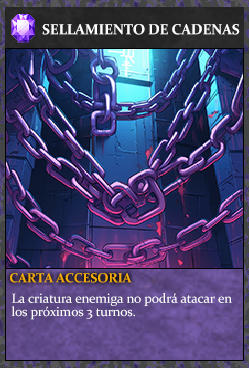
<style>
.page{position:relative;width:249px;height:368px}
.page>*{position:absolute;margin:0}
.t1{font:14.7px "Constantia-Bold";letter-spacing:-0.02em;color:#ffffff}
.t2{font:13.3px "Constantia-Bold";letter-spacing:-0.02em;color:#f2ac05}
.t3{font:13.3px/13.3px "Constantia";letter-spacing:-0.02em;color:#ffffff}
</style>
<div class="page">
<p class="t1" style="left:42px;top:24px;width:198px;height:11px">SELLAMIENTO DE CADENAS</p>
<p class="t2" style="left:10px;top:273px;width:122px;height:10px">CARTA ACCESORIA</p>
<p class="t3" style="left:11px;top:293px;width:221px;height:27px">La criatura enemiga no podrá atacar en<br>los próximos 3 turnos.</p>
</div>
